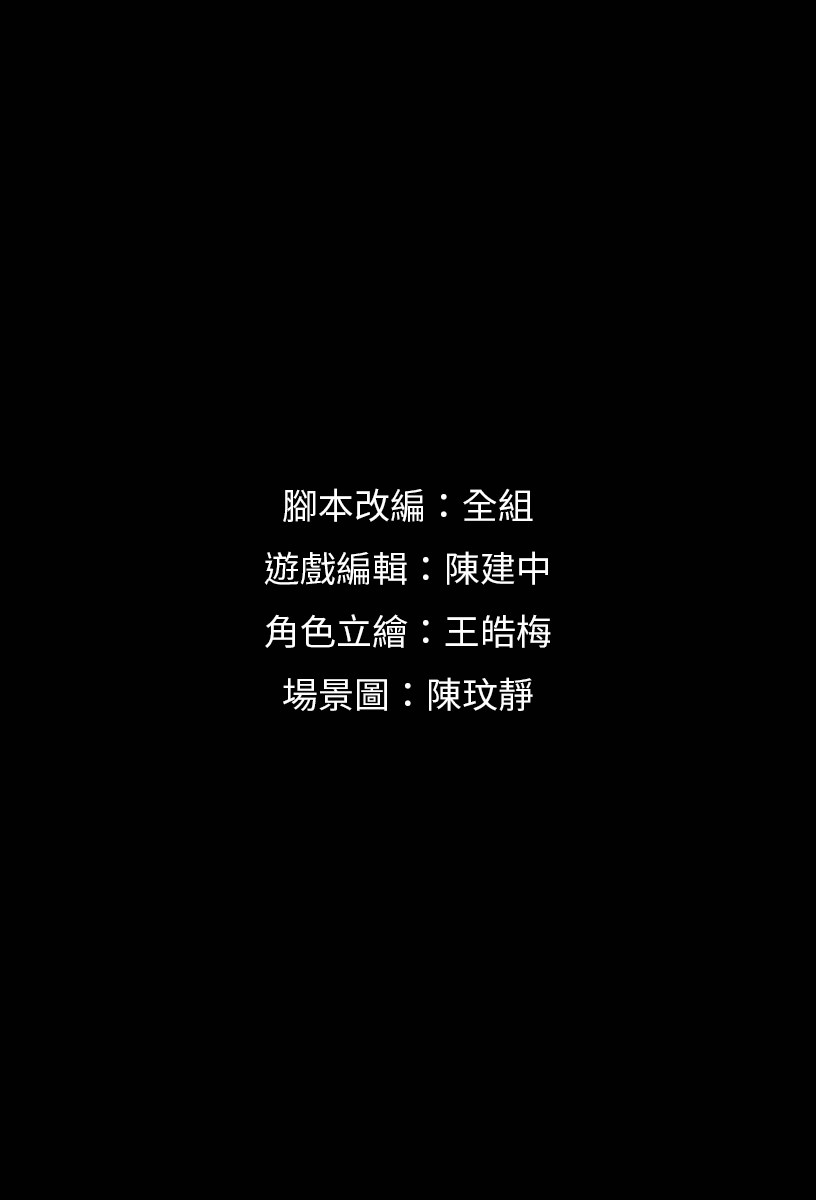
<style>
.page{position:relative;width:816px;height:1200px;background:#010101}
.page>*{position:absolute;margin:0}
.t1{font:36px "NotoSansCJKtc-Regular";color:#ffffff}
</style>
<div class="page">
<p class="t1" style="left:264px;top:488px;width:287px;height:223px;text-align:center">腳本改編：全組<br>遊戲編輯：陳建中<br>角色立繪：王皓梅<br>場景圖：陳玟靜</p>
</div>
